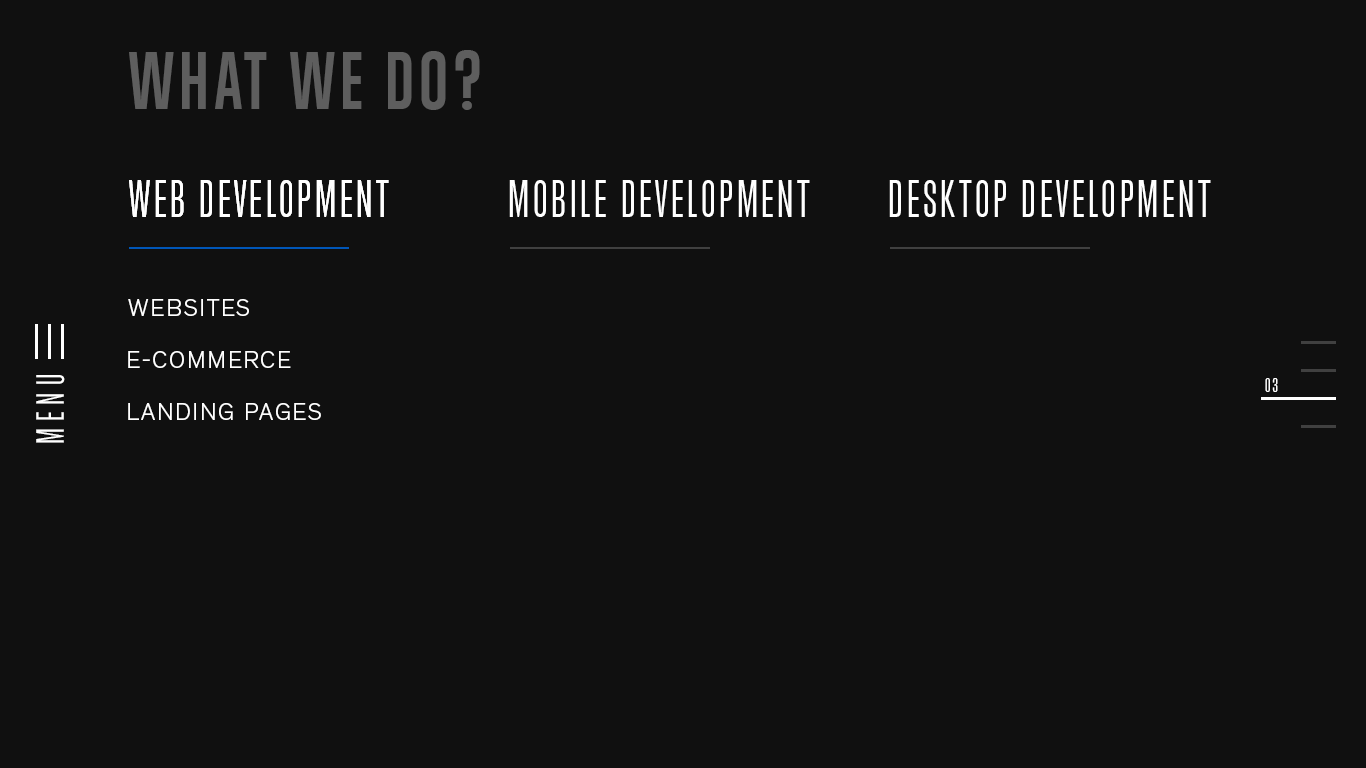
<style>
.page{position:relative;width:1366px;height:768px;background:#101010}
.page>*{position:absolute;margin:0}
.t1{font:75px "TrumpGothicWest-Bold";letter-spacing:0.075em;color:#5e5e5e;text-transform:uppercase}
.t2{font:48px "TrumpGothicWest";letter-spacing:0.075em;color:#ffffff;text-transform:uppercase}
.t3{font:24px "Theinhardt-Light";letter-spacing:0.075em;color:#ffffff;text-transform:uppercase}
.t4{font:36px "TrumpGothicWest";letter-spacing:0.2em;color:#ffffff;text-transform:uppercase}
.t5{font:18px "TrumpGothicWest";letter-spacing:0.1em;color:#ffffff;text-transform:uppercase}
</style>
<div class="page">
<p class="t1" style="left:129px;top:50px;width:351px;height:60px">WHAT WE DO?</p>
<p class="t2" style="left:129px;top:180px;width:260px;height:37px">web development</p>
<p class="t2" style="left:129px;top:180px;width:260px;height:37px">web development</p>
<p class="t2" style="left:509px;top:180px;width:301px;height:37px">mobile development</p>
<p class="t2" style="left:889px;top:180px;width:322px;height:37px">desktop development</p>
<p class="t3" style="left:128px;top:299px;width:121px;height:17px">websites</p>
<p class="t3" style="left:128px;top:351px;width:163px;height:17px">e-commerce</p>
<p class="t4" style="left:36px;top:375px;width:29px;height:68px;rotate:-90deg">menu</p>
<p class="t5" style="left:1265px;top:378px;width:13px;height:14px">03</p>
<p class="t3" style="left:128px;top:403px;width:193px;height:17px">landing pages</p>
</div>
